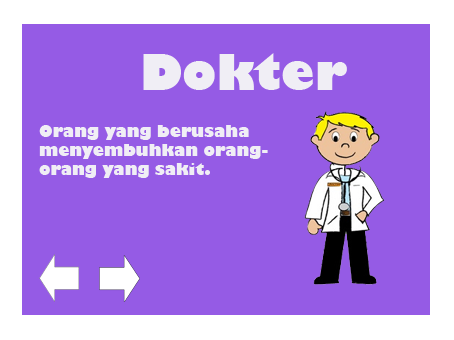
<style>
.page{position:relative;width:454px;height:340px;background:#955be5}
.page>*{position:absolute;margin:0}
.t1{font:48px "GillSans-UltraBold";color:#f0eef5}
.t2{font:16px "GillSans-UltraBold";color:#f0eef5}
</style>
<div class="page">
<p class="t1" style="left:143px;top:53px;width:204px;height:37px">Dokter</p>
<p class="t2" style="left:39px;top:125px;width:229px;height:53px">Orang yang berusaha<br>menyembuhkan orang-<br>orang yang sakit.</p>
</div>
